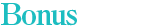
<style>
.page{position:relative;width:168px;height:28px;background:#ffffff}
.page>*{position:absolute;margin:0}
.t1{font:30px "RyuminPro-ExBold";letter-spacing:-0.08em;color:#1cbdc0}
</style>
<div class="page">
<p class="t1" style="left:1px;top:3px;width:76px;height:23px">Bonus</p>
</div>
